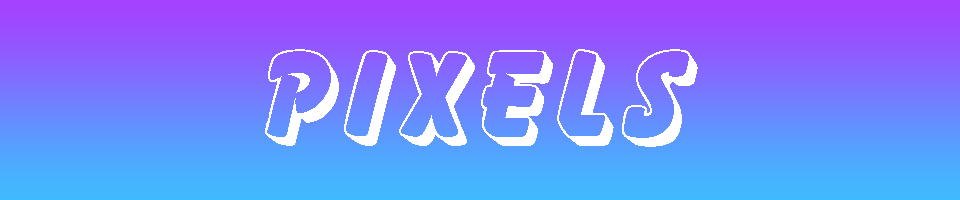
<style>
.page{position:relative;width:960px;height:200px}
.page>*{position:absolute;margin:0}
.t1{font:144px "BalloonDroShaD";letter-spacing:0.05em;color:#ffffff;text-transform:uppercase}
</style>
<div class="page">
<p class="t1" style="left:265px;top:49px;width:433px;height:98px">pixels</p>
</div>
